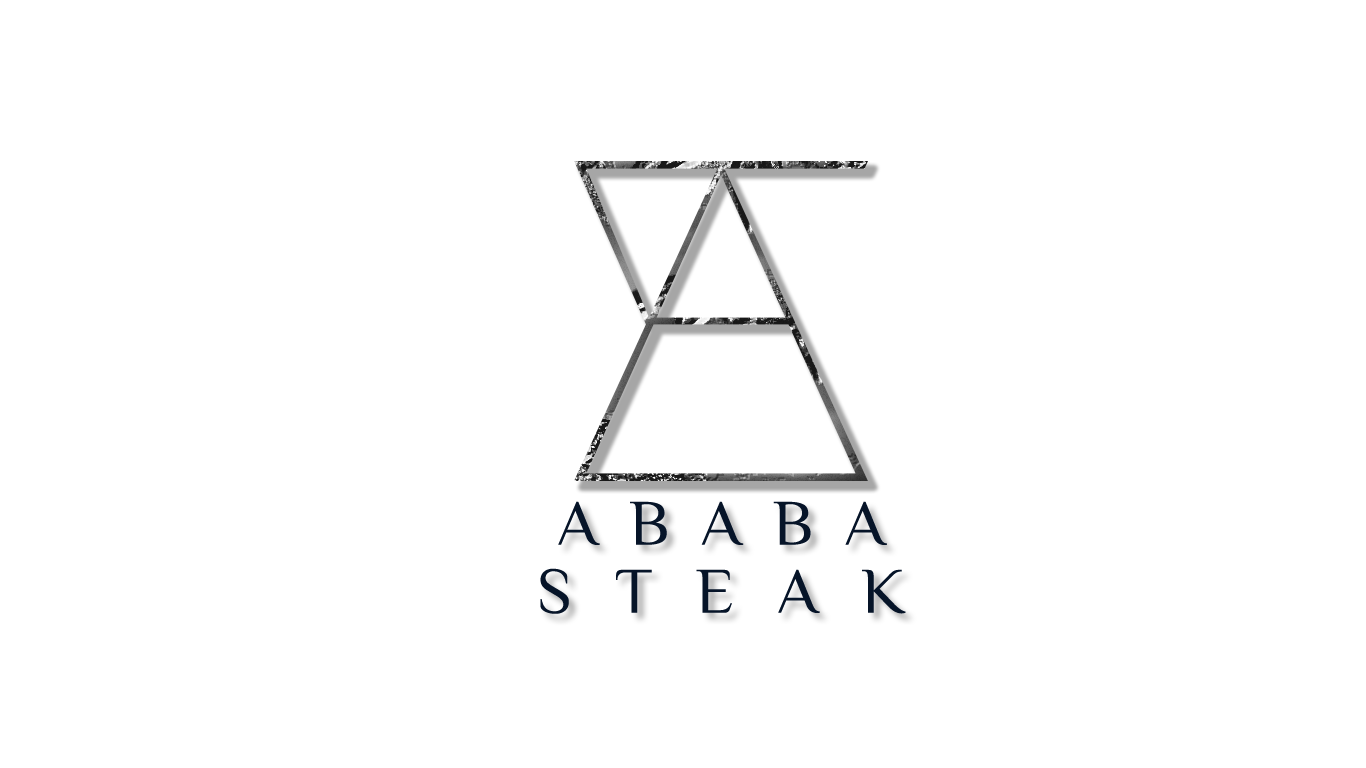
<style>
.page{position:relative;width:1366px;height:768px;background:#ffffff}
.page>*{position:absolute;margin:0}
.t1{font:65px/68px "Philosopher-Regular";letter-spacing:0.48em;color:#061428}
.t2{font:65px/68px "Philosopher-Regular";letter-spacing:0.66em;color:#061428}
</style>
<div class="page">
<p class="t1" style="left:540px;top:501px;width:366px;height:113px;text-align:center">ABABA<br><span class="t2">STEAK</span></p>
</div>
